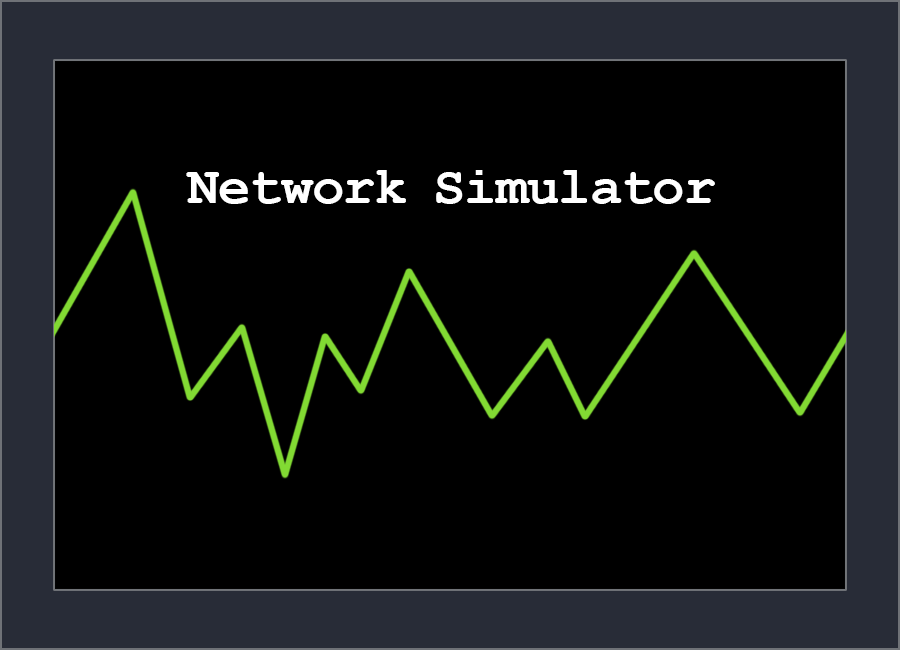
<style>
.page{position:relative;width:900px;height:650px;background:#000000}
.page>*{position:absolute;margin:0}
.t1{font:54px "CourierNewPS-BoldMT";letter-spacing:-0.02em;color:#ffffff}
</style>
<div class="page">
<p class="t1" style="left:186px;top:170px;width:529px;height:34px">Network Simulator</p>
</div>
